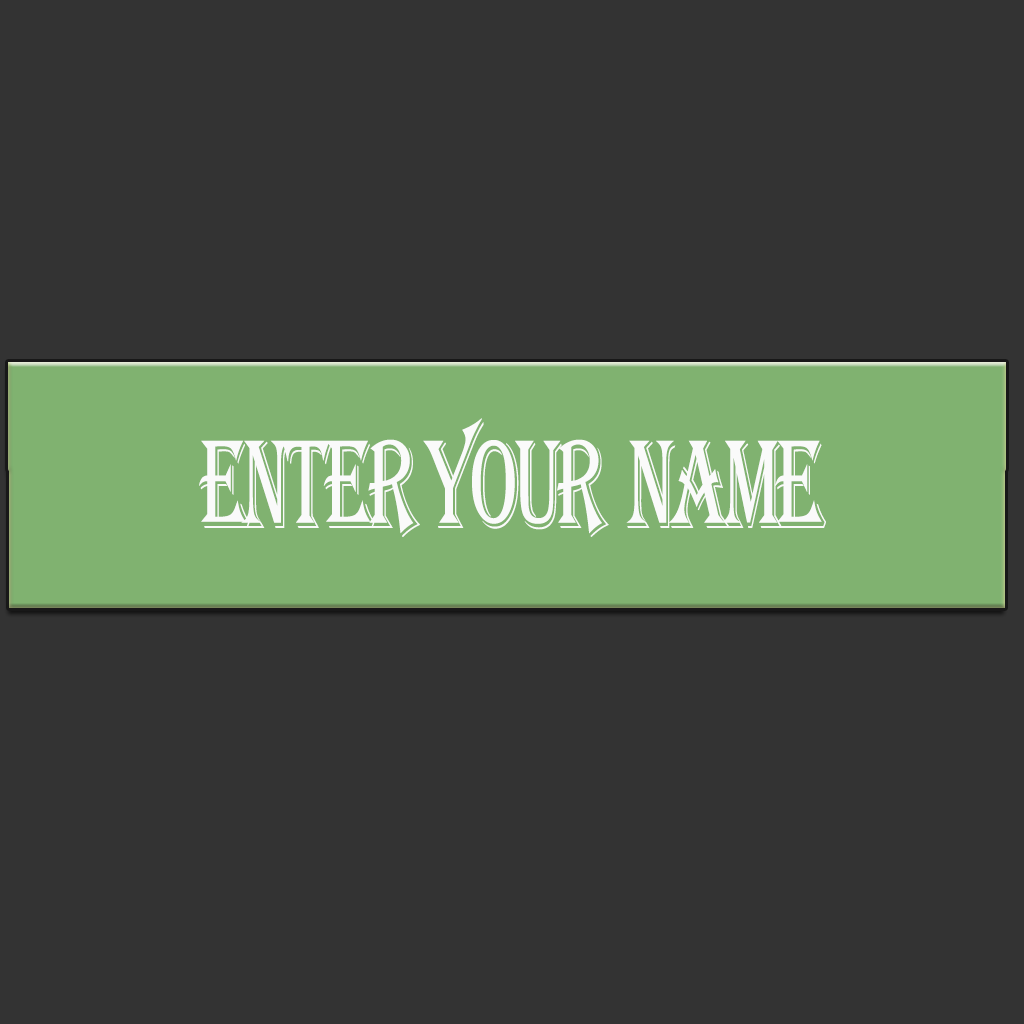
<style>
.page{position:relative;width:1024px;height:1024px;background:#333333}
.page>*{position:absolute;margin:0}
.t1{font:130.4px "Algerian";letter-spacing:-0.08em;color:#fafafa;scale:0.61 1}
</style>
<div class="page">
<p class="t1" style="left:199px;top:418px;width:627px;height:119px">ENTER YOUR  NAME</p>
</div>
